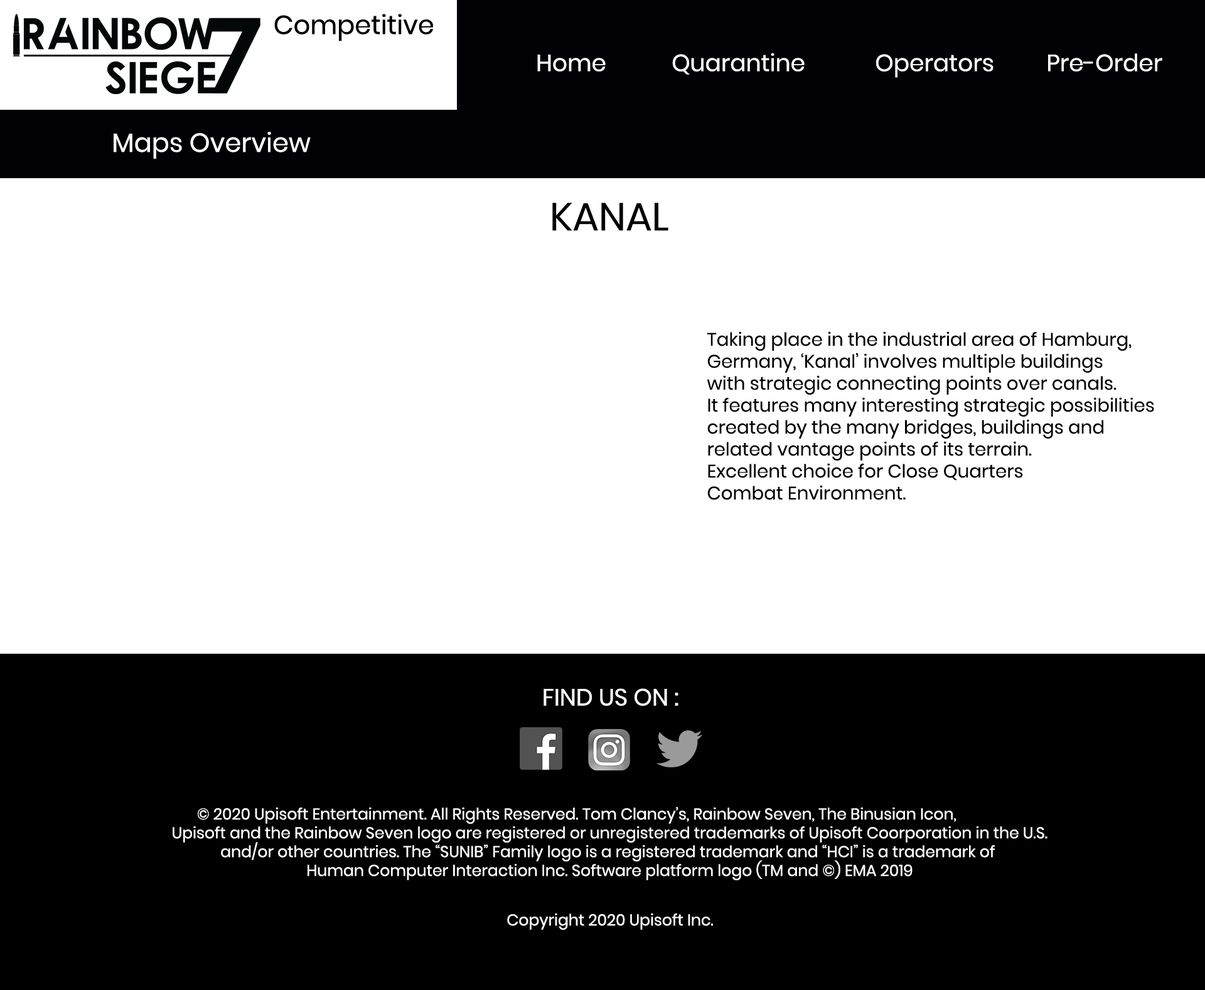
<style>
.page{position:relative;width:1205px;height:990px;background:#ffffff}
.page>*{position:absolute;margin:0}
.t1{font:23.5px "Poppins-Regular";color:#ffffff}
.t2{font:26.1px "Poppins-Regular";color:#ffffff}
.t3{font:39.2px "Poppins-Regular";color:#000000}
.t4{font:18.3px "Poppins-Regular";color:#000000}
.t5{font:15.7px "Poppins-Regular";color:#ffffff}
</style>
<div class="page">
<p class="t1" style="left:537px;top:53px;width:625px;height:25px">Home            Quarantine            Operators         Pre-Order</p>
<p class="t2" style="left:114px;top:132px;width:197px;height:27px">Maps Overview</p>
<p class="t3" style="left:552px;top:203px;width:116px;height:28px">KANAL</p>
<p class="t4" style="left:706px;top:331px;width:448px;height:169px">Taking place in the industrial area of Hamburg, <br>Germany, ‘Kanal’ involves multiple buildings<br>with strategic connecting points over canals. <br>It features many interesting strategic possibilities<br>created by the many bridges, buildings and <br>related vantage points of its terrain. <br>Excellent choice for Close Quarters <br>Combat Environment.</p>
<p class="t1" style="left:543px;top:688px;width:135px;height:18px">FIND US ON :</p>
<p class="t5" style="left:173px;top:807px;width:874px;height:73px;text-align:center">© 2020 Upisoft Entertainment. All Rights Reserved. Tom Clancy’s, Rainbow Seven, The Binusian Icon, <br>                Upisoft and the Rainbow Seven logo are registered or unregistered trademarks of Upisoft Coorporation in the U.S.<br>                and/or other countries. The “SUNIB” Family logo is a registered trademark and “HCI” is a trademark of <br>                Human Computer Interaction Inc. Software platform logo (TM and ©) EMA 2019</p>
<p class="t5" style="left:507px;top:913px;width:206px;height:17px">Copyright 2020 Upisoft Inc.</p>
</div>
